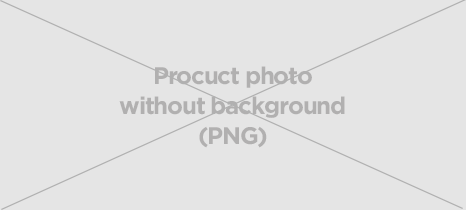
<style>
.page{position:relative;width:466px;height:210px;background:#e5e5e5}
.page>*{position:absolute;margin:0}
.t1{font:24px/30px "GothamBold";letter-spacing:-0.05em;color:#b1b0b0}
</style>
<div class="page">
<p class="t1" style="left:119px;top:66px;width:226px;height:82px;text-align:center">Procuct photo<br>without background<br>(PNG)</p>
</div>
